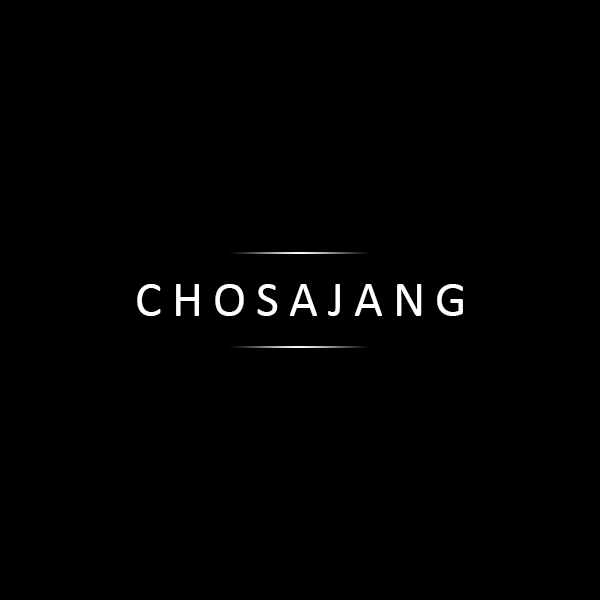
<style>
.page{position:relative;width:600px;height:600px;background:#000000}
.page>*{position:absolute;margin:0}
.t1{font:50px "Calibri";letter-spacing:0.2em;color:#ffffff}
</style>
<div class="page">
<p class="t1" style="left:137px;top:284px;width:326px;height:32px">CHOSAJANG</p>
</div>
